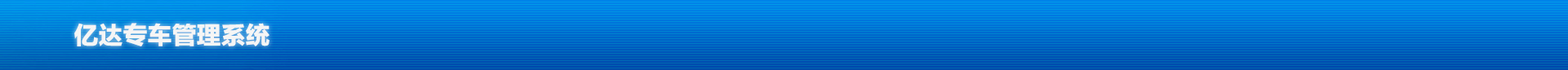
<style>
.page{position:relative;width:1568px;height:70px}
.page>*{position:absolute;margin:0}
.t1{font:24.5px "FZLTTHK--GBK1-0";color:#f5f5f5}
</style>
<div class="page">
<p class="t1" style="left:74px;top:23px;width:196px;height:24px">亿达专车管理系统</p>
</div>
